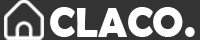
<style>
.page{position:relative;width:200px;height:40px;background:#333333}
.page>*{position:absolute;margin:0}
.t1{font:41.7px "BerlinSansFBDemi-Bold";color:#ffffff}
</style>
<div class="page">
<p class="t1" style="left:50px;top:7px;width:145px;height:30px">CLACO.</p>
</div>
